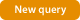
<style>
.page{position:relative;width:80px;height:20px;background:#e68d00}
.page>*{position:absolute;margin:0}
.t1{font:11px "MyriadPro-Semibold";color:#ffffff}
</style>
<div class="page">
<p class="t1" style="left:15px;top:5px;width:52px;height:11px">New query</p>
</div>
